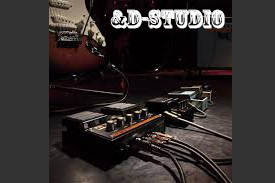
<style>
.page{position:relative;width:275px;height:183px;background:#333333}
.page>*{position:absolute;margin:0}
.t1{font:24px "RosewoodStd-Regular";color:#ffffff}
</style>
<div class="page">
<p class="t1" style="left:110px;top:9px;width:115px;height:20px">&amp;D-Studio</p>
</div>
